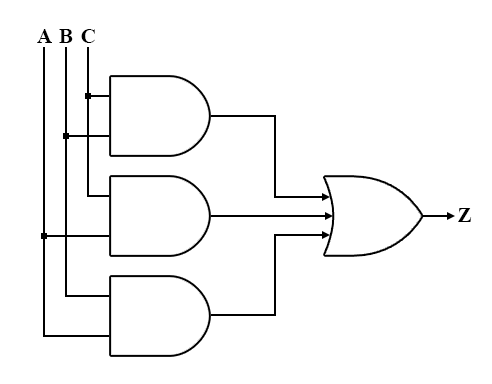
<style>
.page{position:relative;width:492px;height:384px;background:#ffffff}
.page>*{position:absolute;margin:0}
.t1{font:21px "TimesNewRomanPS-BoldMT";color:#000000}
</style>
<div class="page">
<p class="t1" style="left:37px;top:29px;width:15px;height:14px">A</p>
<p class="t1" style="left:59px;top:29px;width:14px;height:14px">B</p>
<p class="t1" style="left:81px;top:29px;width:14px;height:14px">C</p>
<p class="t1" style="left:458px;top:208px;width:14px;height:14px">Z</p>
</div>
